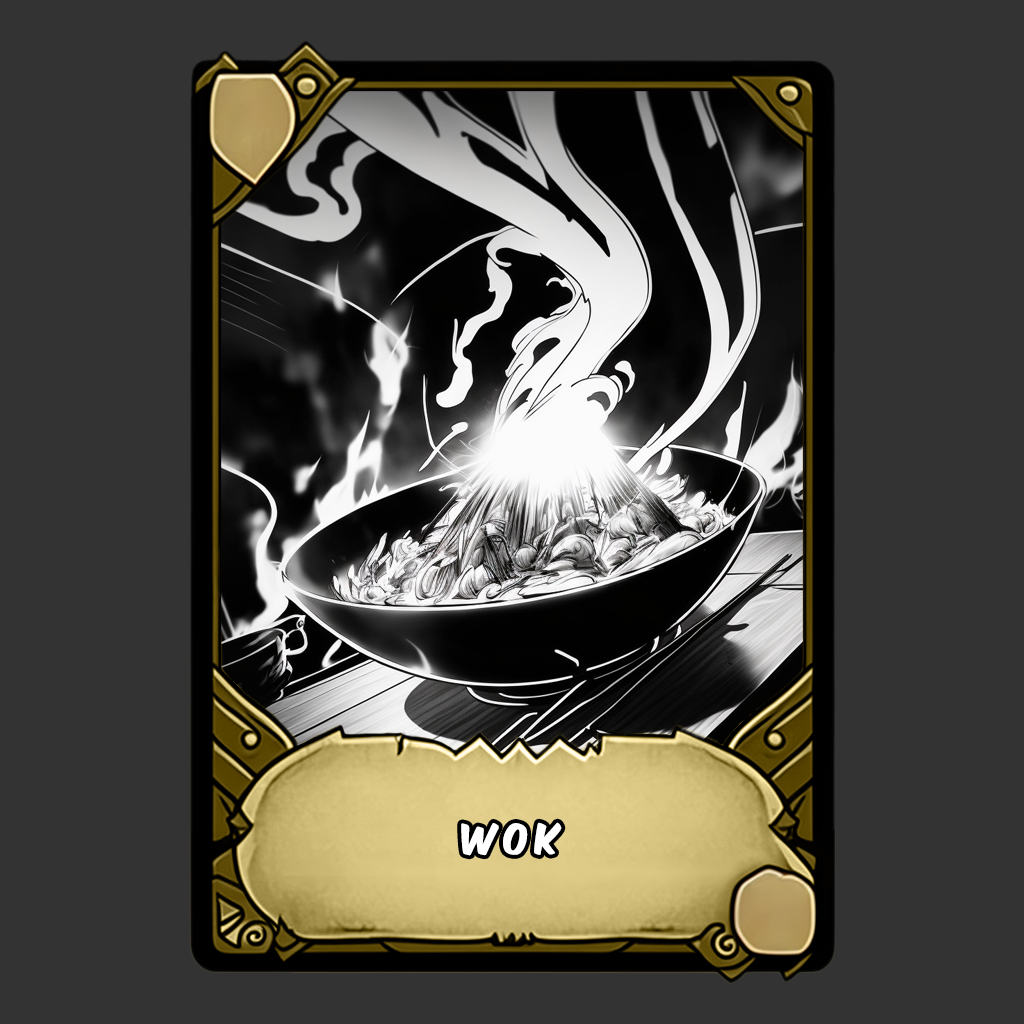
<style>
.page{position:relative;width:1024px;height:1024px;background:#333333}
.page>*{position:absolute;margin:0}
.t1{font:36px "KomikaAxis";letter-spacing:0.2em;color:#ffffff}
</style>
<div class="page">
<p class="t1" style="left:461px;top:822px;width:101px;height:34px">wok</p>
</div>
